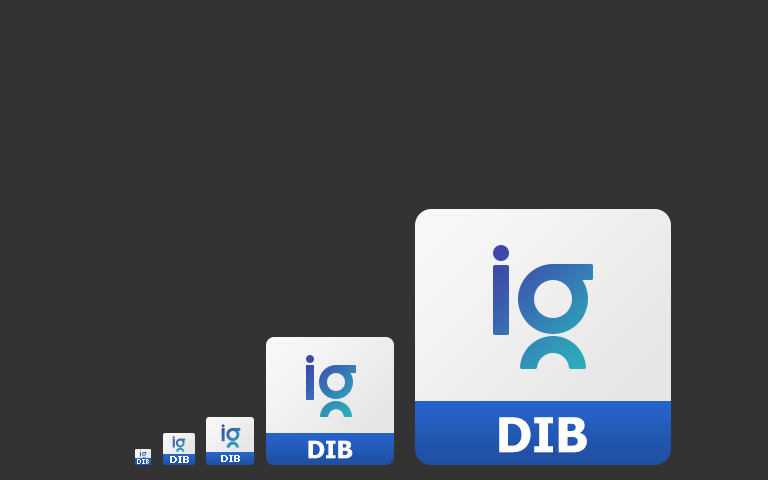
<style>
.page{position:relative;width:768px;height:480px;background:#333333}
.page>*{position:absolute;margin:0}
.t1{font:48px "Tahoma-Bold";color:#ffffff}
.t2{font:24px "Tahoma-Bold";color:#ffffff}
.t3{font:10px "Tahoma-Bold";color:#ffffff}
</style>
<div class="page">
<p class="t1" style="left:499px;top:417px;width:88px;height:36px">DIB</p>
<p class="t2" style="left:308px;top:440px;width:45px;height:19px">DIB</p>
<p class="t3" style="left:170px;top:456px;width:19px;height:7px">DIB</p>
<p class="t3" style="left:221px;top:455px;width:19px;height:7px">DIB</p>
</div>
